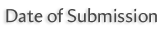
<style>
.page{position:relative;width:164px;height:32px;background:#ffffff}
.page>*{position:absolute;margin:0}
.t1{font:18.7px "Amira-Roman";color:#474747}
</style>
<div class="page">
<p class="t1" style="left:6px;top:8px;width:151px;height:15px">Date of Submission</p>
</div>
